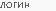
<style>
.page{position:relative;width:56px;height:11px;background:#f9f9f9}
.page>*{position:absolute;margin:0}
.t1{font:8.9px "Calibri";color:#5c5c5c;scale:1.14 1}
</style>
<div class="page">
<p class="t1" style="left:0px;top:2px;width:29px;height:6px">ЛОГИН</p>
</div>
